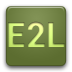
<style>
.page{position:relative;width:72px;height:72px}
.page>*{position:absolute;margin:0}
.t1{font:35px "Roboto-Bold"}
</style>
<div class="page">
<p class="t1" style="left:8px;top:21px;width:57px;height:26px">E2L</p>
</div>
